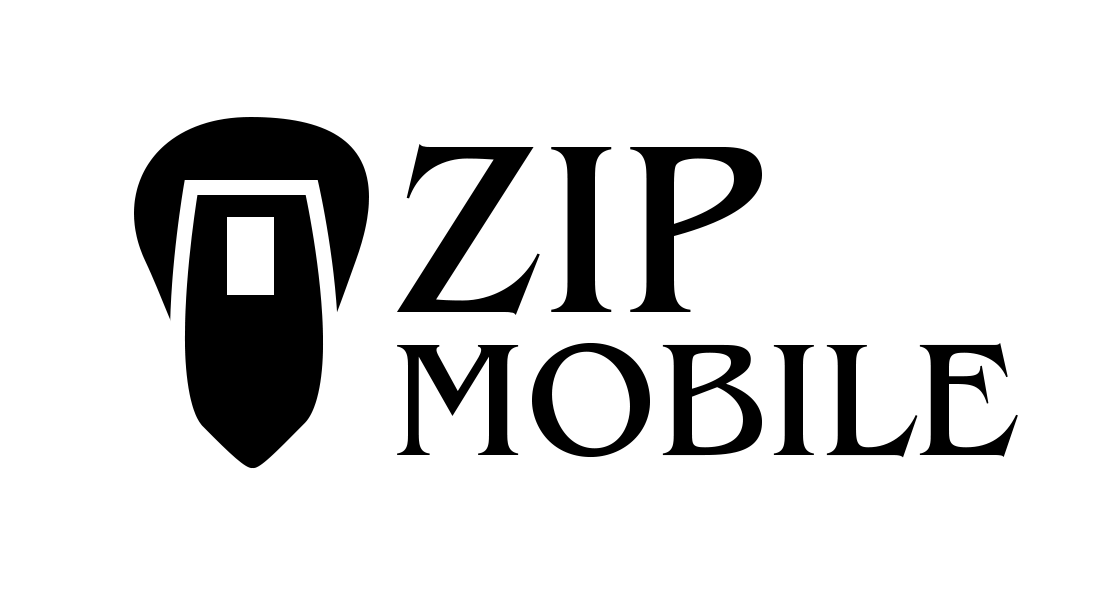
<style>
.page{position:relative;width:1100px;height:600px;background:#ffffff}
.page>*{position:absolute;margin:0}
.t1{font:250px "BenguiatProITC-Book";color:#000000;text-transform:uppercase}
.t2{font:166.7px "BenguiatProITC-Book";color:#000000;text-transform:uppercase}
</style>
<div class="page">
<p class="t1" style="left:397px;top:144px;width:365px;height:171px">Zip</p>
<p class="t2" style="left:397px;top:342px;width:621px;height:116px">Mobile</p>
</div>
